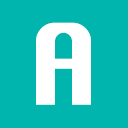
<style>
.page{position:relative;width:128px;height:128px;background:#00b5ad}
.page>*{position:absolute;margin:0}
.t1{font:108px "Krungthep";color:#ffffff;font-weight:bold}
</style>
<div class="page">
<p class="t1" style="left:36px;top:22px;width:55px;height:83px">A</p>
</div>
